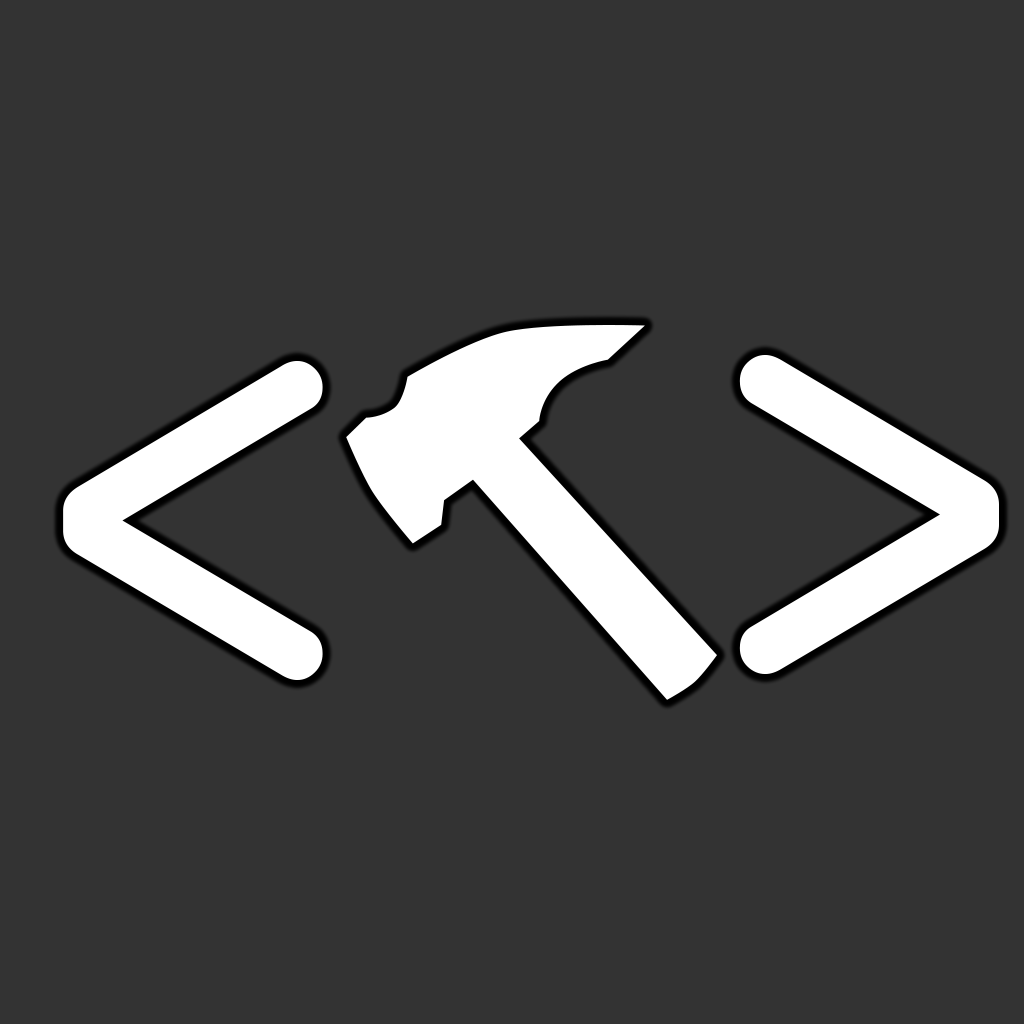
<style>
.page{position:relative;width:1024px;height:1024px;background:#333333}
.page>*{position:absolute;margin:0}
.t1{font:625px "OCRAExtended";color:#ffffff}
</style>
<div class="page">
<p class="t1" style="left:63px;top:361px;width:260px;height:319px">&lt;</p>
<p class="t1" style="left:739px;top:355px;width:260px;height:319px">&gt;</p>
</div>
